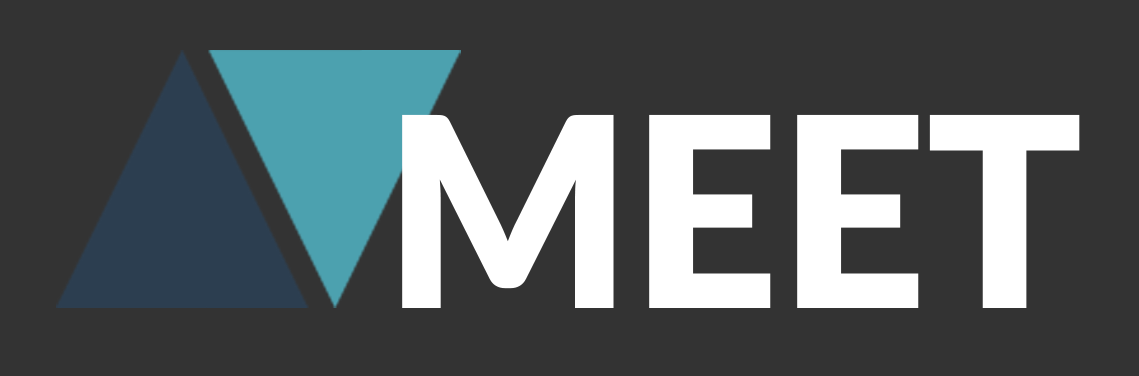
<style>
.page{position:relative;width:1139px;height:376px;background:#333333}
.page>*{position:absolute;margin:0}
.t1{font:264.9px "Lato-Black";color:#ffffff}
</style>
<div class="page">
<p class="t1" style="left:402px;top:114px;width:678px;height:194px">MEET</p>
</div>
